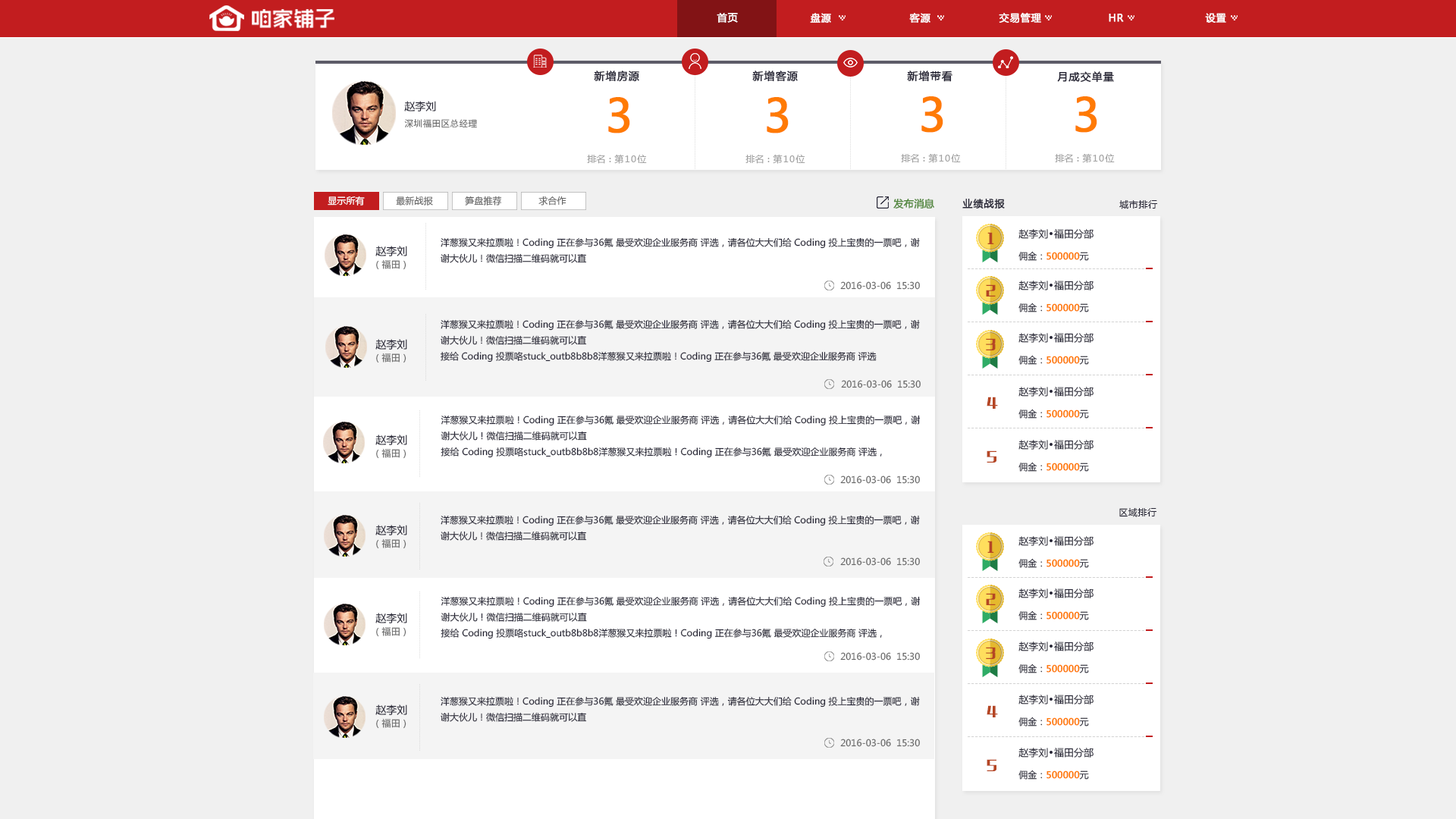
<style>
.page{position:relative;width:1456px;height:819px;background:#f0f0f0}
.page>*{position:absolute;margin:0}
.t1{font:9.9px "MicrosoftYaHei";letter-spacing:0.05em;color:#ffffff;font-weight:bold}
.t2{font:10.6px "MicrosoftYaHei";letter-spacing:0.05em;color:#272636;font-weight:bold}
.t3{font:10.6px "MicrosoftYaHei";color:#272636}
.t4{font:45.5px "MicrosoftYaHei";color:#ff7a04;font-weight:bold}
.t5{font:9.1px "SimHei";color:#676767}
.t6{font:9.1px "MicrosoftYaHei";letter-spacing:0.1em;color:#a3a3a3}
.t7{font:9.1px "MicrosoftYaHei";color:#a3a3a3}
.t8{font:9.1px "MicrosoftYaHei";letter-spacing:0.005em;color:#ffffff}
.t9{font:9.1px "MicrosoftYaHei";letter-spacing:0.005em;color:#676767}
.t10{font:9.9px "MicrosoftYaHei";letter-spacing:0.005em;color:#54893f;font-weight:bold}
.t11{font:9.9px "MicrosoftYaHei";letter-spacing:0.05em;color:#272636;font-weight:bold}
.t12{font:9.1px "MicrosoftYaHei";letter-spacing:0.05em;color:#272636}
.t13{font:12.6px "MFLiHei_Noncommercial-Regular";letter-spacing:0.05em;color:#b54624}
.t14{font:9.9px "MicrosoftYaHei";color:#272636}
.t15{font:9.1px "MicrosoftYaHei";color:#272636}
.t16{font:9.5px "MicrosoftYaHei";color:#272636}
.t17{font:9.1px "MicrosoftYaHei";color:#ff7a04;font-weight:bold}
.t18{font:9.1px "MicrosoftYaHei";color:#676767}
</style>
<div class="page">
<p class="t1" style="left:717px;top:13px;width:21px;height:10px">首页</p>
<p class="t1" style="left:810px;top:13px;width:21px;height:11px">盘源</p>
<p class="t1" style="left:909px;top:13px;width:21px;height:11px">客源</p>
<p class="t1" style="left:999px;top:12px;width:42px;height:12px">交易管理</p>
<p class="t1" style="left:1109px;top:14px;width:15px;height:8px">HR</p>
<p class="t1" style="left:1205px;top:13px;width:21px;height:10px">设置</p>
<p class="t2" style="left:594px;top:71px;width:45px;height:11px">新增房源</p>
<p class="t2" style="left:752px;top:71px;width:46px;height:11px">新增客源</p>
<p class="t2" style="left:907px;top:71px;width:45px;height:11px">新增带看</p>
<p class="t2" style="left:1057px;top:71px;width:57px;height:12px">月成交单量</p>
<p class="t3" style="left:404px;top:101px;width:32px;height:10px">赵李刘</p>
<p class="t4" style="left:608px;top:97px;width:22px;height:36px">3</p>
<p class="t4" style="left:767px;top:97px;width:22px;height:36px">3</p>
<p class="t4" style="left:921px;top:96px;width:22px;height:37px">3</p>
<p class="t4" style="left:1075px;top:96px;width:22px;height:37px">3</p>
<p class="t5" style="left:404px;top:119px;width:73px;height:9px">深圳福田区总经理</p>
<p class="t6" style="left:587px;top:154px;width:60px;height:10px"><span class="t7">排名：</span>第10位</p>
<p class="t6" style="left:745px;top:154px;width:60px;height:10px"><span class="t7">排名：</span>第10位</p>
<p class="t6" style="left:901px;top:153px;width:60px;height:10px"><span class="t7">排名：</span>第10位</p>
<p class="t6" style="left:1055px;top:153px;width:60px;height:10px"><span class="t7">排名：</span>第10位</p>
<p class="t8" style="left:328px;top:196px;width:37px;height:10px">显示所有</p>
<p class="t9" style="left:396px;top:196px;width:37px;height:10px">最新战报</p>
<p class="t9" style="left:465px;top:196px;width:37px;height:10px">笋盘推荐</p>
<p class="t9" style="left:538px;top:196px;width:28px;height:10px">求合作</p>
<p class="t10" style="left:893px;top:198px;width:41px;height:11px">发布消息</p>
<p class="t11" style="left:962px;top:199px;width:43px;height:10px">业绩战报</p>
<p class="t12" style="left:1119px;top:199px;width:38px;height:10px">城市排行</p>
<p class="t13" style="left:987px;top:232px;width:7px;height:12px">1</p>
<p class="t14" style="left:1018px;top:229px;width:76px;height:10px">赵李刘  福田分部</p>
<p class="t3" style="left:375px;top:246px;width:32px;height:10px">赵李刘</p>
<p class="t15" style="left:441px;top:237px;width:479px;height:26px">洋葱猴又来拉票啦！Coding 正在参与36氪 最受欢迎企业服务商 评选，请各位大大们给 Coding 投上宝贵的一票吧，谢谢大伙儿！微信扫描二维码就可以直<br><span class="t16">接给 Coding 投票咯stuck_out<br>_tongue_closed_eyes大伙儿！</span></p>
<p class="t17" style="left:1018px;top:251px;width:71px;height:10px"><span class="t15">佣金：</span>500000<span class="t15">元</span></p>
<p class="t18" style="left:376px;top:259px;width:30px;height:11px">（福田）</p>
<p class="t18" style="left:840px;top:281px;width:80px;height:9px">2016-03-06  15:30</p>
<p class="t14" style="left:1018px;top:281px;width:76px;height:9px">赵李刘  福田分部</p>
<p class="t13" style="left:986px;top:284px;width:10px;height:13px">2</p>
<p class="t17" style="left:1018px;top:303px;width:71px;height:9px"><span class="t15">佣金：</span>500000<span class="t15">元</span></p>
<p class="t15" style="left:441px;top:319px;width:479px;height:43px">洋葱猴又来拉票啦！Coding 正在参与36氪 最受欢迎企业服务商 评选，请各位大大们给 Coding 投上宝贵的一票吧，谢谢大伙儿！微信扫描二维码就可以直<br>接给 Coding 投票咯stuck_outb8b8b8洋葱猴又来拉票啦！Coding 正在参与36氪 最受欢迎企业服务商 评选</p>
<p class="t3" style="left:375px;top:339px;width:32px;height:11px">赵李刘</p>
<p class="t13" style="left:986px;top:338px;width:10px;height:12px">3</p>
<p class="t14" style="left:1018px;top:333px;width:76px;height:10px">赵李刘  福田分部</p>
<p class="t18" style="left:376px;top:353px;width:30px;height:10px">（福田）</p>
<p class="t17" style="left:1018px;top:355px;width:71px;height:10px"><span class="t15">佣金：</span>500000<span class="t15">元</span></p>
<p class="t18" style="left:841px;top:380px;width:80px;height:8px">2016-03-06  15:30</p>
<p class="t14" style="left:1018px;top:387px;width:76px;height:10px">赵李刘  福田分部</p>
<p class="t13" style="left:987px;top:397px;width:11px;height:12px">4</p>
<p class="t17" style="left:1018px;top:409px;width:71px;height:10px"><span class="t15">佣金：</span>500000<span class="t15">元</span></p>
<p class="t15" style="left:441px;top:415px;width:480px;height:43px">洋葱猴又来拉票啦！Coding 正在参与36氪 最受欢迎企业服务商 评选，请各位大大们给 Coding 投上宝贵的一票吧，谢谢大伙儿！微信扫描二维码就可以直<br>接给 Coding 投票咯stuck_outb8b8b8洋葱猴又来拉票啦！Coding 正在参与36氪 最受欢迎企业服务商 评选，</p>
<p class="t3" style="left:375px;top:435px;width:32px;height:10px">赵李刘</p>
<p class="t18" style="left:376px;top:448px;width:30px;height:11px">（福田）</p>
<p class="t14" style="left:1018px;top:440px;width:76px;height:10px">赵李刘  福田分部</p>
<p class="t13" style="left:987px;top:450px;width:9px;height:13px">5</p>
<p class="t17" style="left:1018px;top:462px;width:71px;height:10px"><span class="t15">佣金：</span>500000<span class="t15">元</span></p>
<p class="t18" style="left:840px;top:475px;width:80px;height:9px">2016-03-06  15:30</p>
<p class="t12" style="left:1119px;top:507px;width:37px;height:10px">区域排行</p>
<p class="t15" style="left:441px;top:515px;width:479px;height:26px">洋葱猴又来拉票啦！Coding 正在参与36氪 最受欢迎企业服务商 评选，请各位大大们给 Coding 投上宝贵的一票吧，谢谢大伙儿！微信扫描二维码就可以直<br><span class="t16">接给 Coding 投票咯stuck_out<br>_tongue_closed_eyes大伙儿！</span></p>
<p class="t3" style="left:375px;top:525px;width:32px;height:10px">赵李刘</p>
<p class="t18" style="left:376px;top:538px;width:30px;height:11px">（福田）</p>
<p class="t13" style="left:987px;top:541px;width:7px;height:12px">1</p>
<p class="t14" style="left:1018px;top:536px;width:76px;height:10px">赵李刘  福田分部</p>
<p class="t18" style="left:840px;top:557px;width:80px;height:9px">2016-03-06  15:30</p>
<p class="t17" style="left:1018px;top:558px;width:71px;height:10px"><span class="t15">佣金：</span>500000<span class="t15">元</span></p>
<p class="t13" style="left:986px;top:593px;width:10px;height:12px">2</p>
<p class="t14" style="left:1018px;top:588px;width:76px;height:10px">赵李刘  福田分部</p>
<p class="t15" style="left:441px;top:596px;width:480px;height:43px">洋葱猴又来拉票啦！Coding 正在参与36氪 最受欢迎企业服务商 评选，请各位大大们给 Coding 投上宝贵的一票吧，谢谢大伙儿！微信扫描二维码就可以直<br>接给 Coding 投票咯stuck_outb8b8b8洋葱猴又来拉票啦！Coding 正在参与36氪 最受欢迎企业服务商 评选，</p>
<p class="t3" style="left:375px;top:613px;width:32px;height:10px">赵李刘</p>
<p class="t17" style="left:1018px;top:610px;width:71px;height:10px"><span class="t15">佣金：</span>500000<span class="t15">元</span></p>
<p class="t18" style="left:376px;top:626px;width:30px;height:11px">（福田）</p>
<p class="t14" style="left:1018px;top:642px;width:76px;height:9px">赵李刘  福田分部</p>
<p class="t18" style="left:840px;top:652px;width:80px;height:8px">2016-03-06  15:30</p>
<p class="t13" style="left:986px;top:647px;width:10px;height:12px">3</p>
<p class="t17" style="left:1018px;top:664px;width:71px;height:9px"><span class="t15">佣金：</span>500000<span class="t15">元</span></p>
<p class="t15" style="left:441px;top:696px;width:479px;height:26px">洋葱猴又来拉票啦！Coding 正在参与36氪 最受欢迎企业服务商 评选，请各位大大们给 Coding 投上宝贵的一票吧，谢谢大伙儿！微信扫描二维码就可以直<br><span class="t16">接给 Coding 投票咯stuck_out<br>_tongue_closed_eyes大伙儿！</span></p>
<p class="t14" style="left:1018px;top:695px;width:76px;height:9px">赵李刘  福田分部</p>
<p class="t3" style="left:375px;top:704px;width:32px;height:11px">赵李刘</p>
<p class="t13" style="left:987px;top:705px;width:11px;height:12px">4</p>
<p class="t18" style="left:376px;top:718px;width:30px;height:11px">（福田）</p>
<p class="t17" style="left:1018px;top:717px;width:71px;height:9px"><span class="t15">佣金：</span>500000<span class="t15">元</span></p>
<p class="t18" style="left:840px;top:739px;width:80px;height:8px">2016-03-06  15:30</p>
<p class="t14" style="left:1018px;top:748px;width:76px;height:10px">赵李刘  福田分部</p>
<p class="t13" style="left:987px;top:759px;width:9px;height:12px">5</p>
<p class="t17" style="left:1018px;top:770px;width:71px;height:10px"><span class="t15">佣金：</span>500000<span class="t15">元</span></p>
</div>
